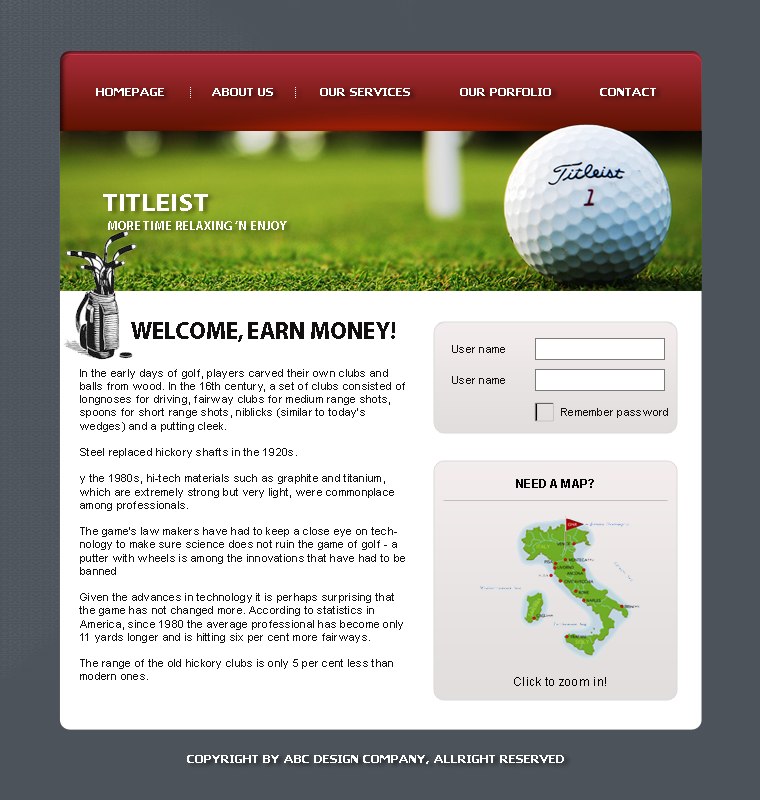
<style>
.page{position:relative;width:760px;height:800px;background:#ffffff}
.page>*{position:absolute;margin:0}
.t1{font:11px "Tahoma-Bold";color:#ffffff;scale:1.2 1}
.t2{font:24px "Myriad-Bold";color:#ffffff;scale:1.2 1}
.t3{font:12px "Myriad-Bold";letter-spacing:0.025em;color:#ffffff}
.t4{font:24px "Myriad-Bold";color:#12100e}
.t5{font:11px "ArialMT";letter-spacing:0.025em;color:#12100e}
.t6{font:12px "Arial-BoldMT";letter-spacing:0.025em;color:#000000}
.t7{font:12px "ArialMT";letter-spacing:0.025em;color:#000000}
</style>
<div class="page">
<p class="t1" style="left:96px;top:88px;width:560px;height:8px">HOMEPAGE      ABOUT US    OUR SERVICES   OUR PORFOLIO  CONTACT</p>
<p class="t2" style="left:103px;top:194px;width:105px;height:17px">TITLEIST</p>
<p class="t3" style="left:108px;top:221px;width:179px;height:9px">MORE TIME RELAXING ‘N ENJOY</p>
<p class="t4" style="left:131px;top:322px;width:264px;height:20px">WELCOME, EARN MONEY!</p>
<p class="t5" style="left:452px;top:345px;width:53px;height:8px">User name</p>
<p class="t5" style="left:79px;top:369px;width:326px;height:311px">In the early days of golf, players carved their own clubs and balls from wood. In the 16th century, a set of clubs consisted of longnoses for driving, fairway clubs for medium range shots, spoons for short range shots, niblicks (similar to today's wedges) and a putting cleek.<br><br>Steel replaced hickory shafts in the 1920s.<br><br>y the 1980s, hi-tech materials such as graphite and titanium, which are extremely strong but very light, were commonplace among professionals.<br><br>The game's law makers have had to keep a close eye on technology to make sure science does not ruin the game of golf - a putter with wheels is among the innovations that have had to be banned<br><br>Given the advances in technology it is perhaps surprising that the game has not changed more. According to statistics in America, since 1980 the average professional has become only 11 yards longer and is hitting six per cent more fairways.<br><br>The range of the old hickory clubs is only 5 per cent less than modern ones.</p>
<p class="t5" style="left:452px;top:376px;width:53px;height:8px">User name</p>
<p class="t5" style="left:561px;top:408px;width:107px;height:10px">Remember password</p>
<p class="t6" style="left:516px;top:479px;width:78px;height:9px">NEED A MAP?</p>
<p class="t7" style="left:514px;top:677px;width:92px;height:9px">Click to zoom in!</p>
<p class="t1" style="left:187px;top:755px;width:377px;height:9px">COPYRIGHT BY ABC DESIGN COMPANY, ALLRIGHT RESERVED</p>
</div>
